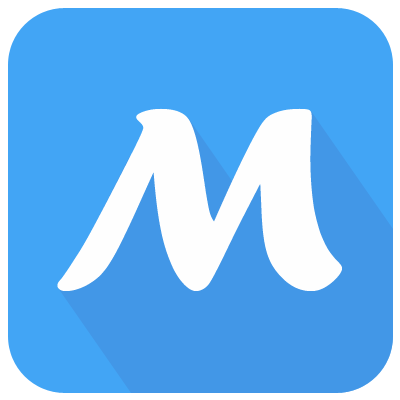
<style>
.page{position:relative;width:400px;height:400px;background:#42a5f5}
.page>*{position:absolute;margin:0}
.t1{font:272px "ForteMT";color:#fefefe}
</style>
<div class="page">
<p class="t1" style="left:57px;top:108px;width:285px;height:183px">M</p>
</div>
